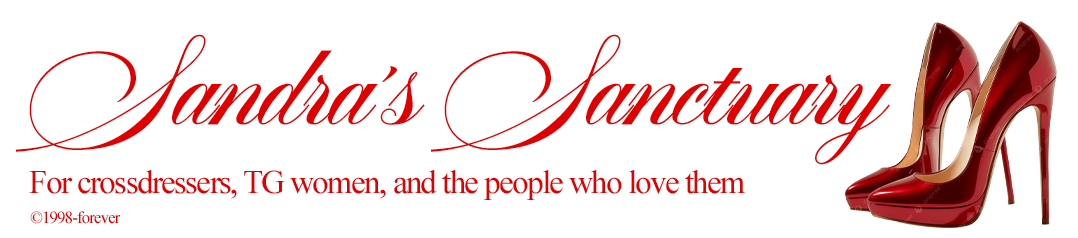
<style>
.page{position:relative;width:1078px;height:238px;background:#ffffff}
.page>*{position:absolute;margin:0}
.t1{font:79.5px "AstonScriptBold-Bold";letter-spacing:-0.05em;color:#df0002}
.t2{font:33.1px "TimesNewRomanPSMT";letter-spacing:-0.05em;color:#df0002}
.t3{font:16.8px "TimesNewRomanPSMT";letter-spacing:-0.05em;color:#df0002}
</style>
<div class="page">
<p class="t1" style="left:16px;top:34px;width:876px;height:131px">Sandra’s Sanctuary</p>
<p class="t2" style="left:29px;top:170px;width:716px;height:30px">For crossdressers, TG women, and the people who love them</p>
<p class="t3" style="left:30px;top:211px;width:91px;height:13px">©1998-forever</p>
</div>
